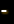
<style>
.page{position:relative;width:14px;height:24px;background:#000000}
.page>*{position:absolute;margin:0}
.t1{font:18.7px "BritannicBold";color:#ffffff}
</style>
<div class="page">
<p class="t1" style="left:1px;top:10px;width:6px;height:2px">-</p>
</div>
